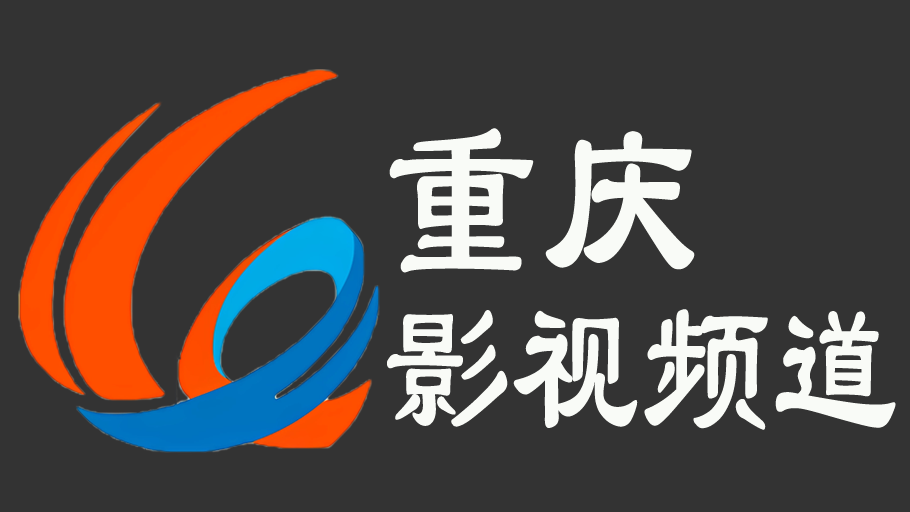
<style>
.page{position:relative;width:910px;height:512px;background:#333333}
.page>*{position:absolute;margin:0}
.t1{font:195px/180px "SJlishu-Regular";color:#f9fbf7;scale:0.67 1}
.t2{font:240px/180px "SJlishu-Regular";color:#f9fbf7;scale:0.67 1}
</style>
<div class="page">
<p class="t1" style="left:387px;top:128px;width:509px;height:302px"><span class="t2">重庆<br></span>影视频道</p>
</div>
